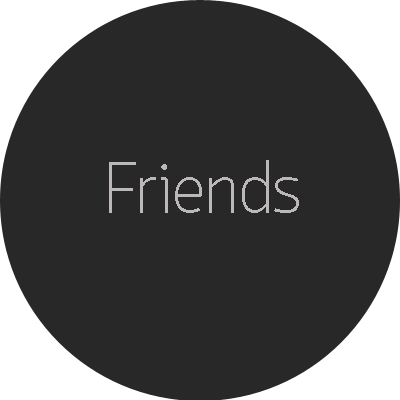
<style>
.page{position:relative;width:400px;height:400px;background:#282828}
.page>*{position:absolute;margin:0}
.t1{font:72px "Quark-Light";color:#bcb8b8}
</style>
<div class="page">
<p class="t1" style="left:109px;top:160px;width:190px;height:53px">Friends</p>
</div>
